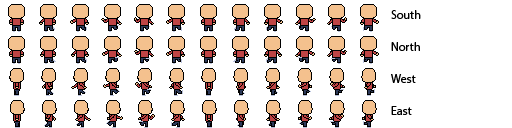
<style>
.page{position:relative;width:512px;height:128px;background:#ffffff}
.page>*{position:absolute;margin:0}
.t1{font:12px "MyriadPro-Regular";color:#000000}
</style>
<div class="page">
<p class="t1" style="left:391px;top:10px;width:30px;height:9px">South</p>
<p class="t1" style="left:391px;top:42px;width:29px;height:9px">North</p>
<p class="t1" style="left:391px;top:74px;width:25px;height:9px">West</p>
<p class="t1" style="left:391px;top:106px;width:21px;height:9px">East</p>
</div>
